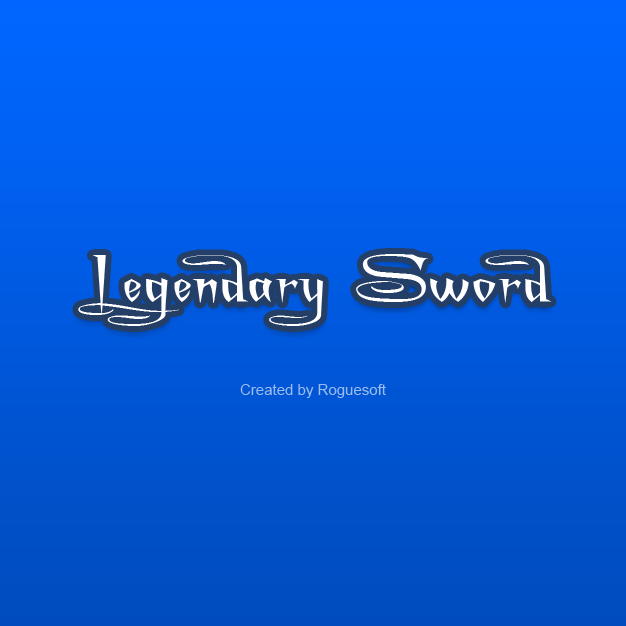
<style>
.page{position:relative;width:626px;height:626px}
.page>*{position:absolute;margin:0}
.t1{font:72px "ACharmingFontSuperexpanded";color:#ffffff}
.t2{font:15px "ArialMT";color:#99bbee}
</style>
<div class="page">
<p class="t1" style="left:78px;top:254px;width:473px;height:72px">Legendary Sword</p>
<p class="t2" style="left:240px;top:384px;width:146px;height:14px">Created by Roguesoft</p>
</div>
